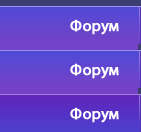
<style>
.page{position:relative;width:141px;height:132px}
.page>*{position:absolute;margin:0}
.t1{font:16px "MyriadPro-Regular";color:#ffffff;font-weight:bold}
</style>
<div class="page">
<p class="t1" style="left:70px;top:19px;width:49px;height:16px">Форум</p>
<p class="t1" style="left:70px;top:63px;width:49px;height:16px">Форум</p>
<p class="t1" style="left:70px;top:107px;width:49px;height:16px">Форум</p>
</div>
